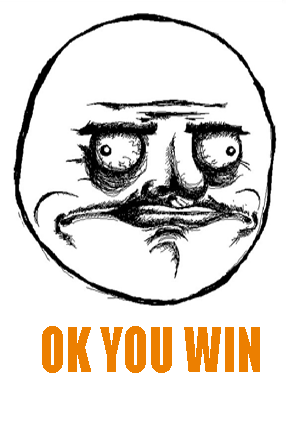
<style>
.page{position:relative;width:300px;height:446px;background:#ffffff}
.page>*{position:absolute;margin:0}
.t1{font:57.1px "Impact";color:#ec7f00;scale:0.84 1}
</style>
<div class="page">
<p class="t1" style="left:42px;top:326px;width:218px;height:47px">OK YOU WIN</p>
</div>
